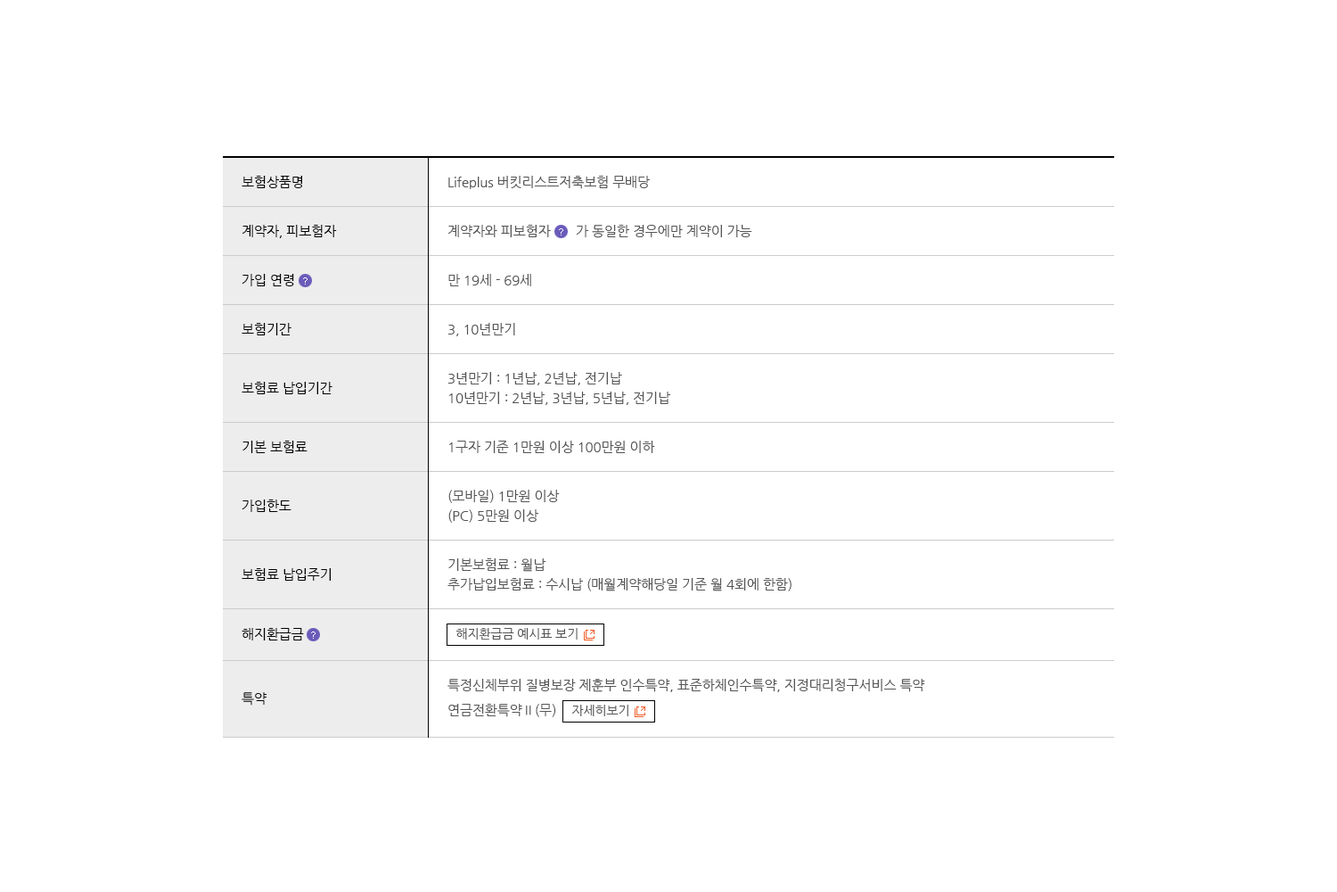
<style>
.page{position:relative;width:1337px;height:892px;background:#ffffff}
.page>*{position:absolute;margin:0}
.t1{font:13.4px/49px "NanumGothic";letter-spacing:-0.01em;color:#000000}
.t2{font:13.4px/58.8px "NanumGothic";letter-spacing:-0.01em;color:#000000}
.t3{font:13.4px/68.7px "NanumGothic";letter-spacing:-0.01em;color:#000000}
.t4{font:13.4px/59.7px "NanumGothic";letter-spacing:-0.01em;color:#000000}
.t5{font:13.4px/64.2px "NanumGothic";letter-spacing:-0.01em;color:#000000}
.t6{font:13.4px/49px "NanumGothic";letter-spacing:-0.01em;color:#555555}
.t7{font:13.4px/19.6px "NanumGothic";letter-spacing:-0.01em;color:#555555}
.t8{font:13.4px/22.3px "NanumGothic";letter-spacing:-0.01em;color:#555555}
.t9{font:13.4px/25px "NanumGothic";letter-spacing:-0.01em;color:#555555}
.t10{font:12.5px "NanumGothic";letter-spacing:-0.01em;color:#555555}
</style>
<div class="page">
<p class="t1" style="left:242px;top:176px;width:95px;height:529px">보험상품명<br>계약자, 피보험자<br>가입 연령<br>보험기간<br><span class="t2">보험료 납입기간<br>기본 보험료<br>가입한도<br></span><span class="t3">보험료 납입주기<br></span><span class="t4">해지환급금<br></span><span class="t5">특약</span></p>
<p class="t6" style="left:448px;top:176px;width:477px;height:541px">Lifeplus 버킷리스트저축보험 무배당<br>계약자와 피보험자       가 동일한 경우에만 계약이 가능<br>만 19세 - 69세<br>3, 10년만기<br>3년만기 : 1년납, 2년납, 전기납<br><span class="t7">10년만기 : 2년납, 3년납, 5년납, 전기납<br></span>1구자 기준 1만원 이상 100만원 이하<br>(모바일) 1만원 이상<br><span class="t7">(PC) 5만원 이상<br></span>기본보험료 : 월납<br><span class="t7">추가납입보험료 : 수시납 (매월계약해당일 기준 월 4회에 한함)<br><br><br><br><br></span><span class="t8">특정신체부위 질병보장 제훈부 인수특약, 표준하체인수특약, 지정대리청구서비스 특약<br></span><span class="t9">연금전환특약Ⅱ(무)</span></p>
<p class="t10" style="left:457px;top:627px;width:121px;height:13px">해지환급금 예시표 보기</p>
<p class="t10" style="left:572px;top:704px;width:57px;height:12px">자세히보기</p>
</div>
